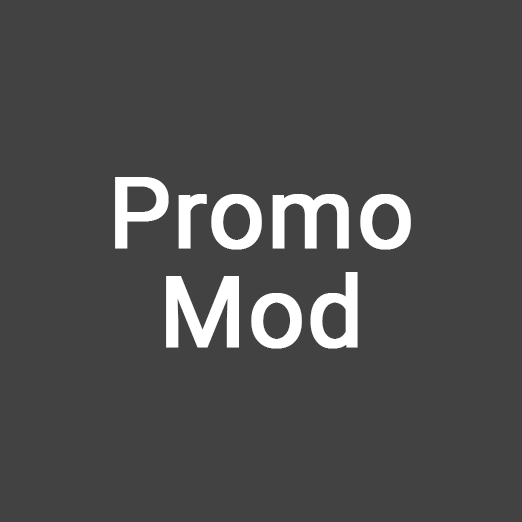
<style>
.page{position:relative;width:522px;height:522px;background:#424242}
.page>*{position:absolute;margin:0}
.t1{font:99px/99px "Roboto-Regular";color:#ffffff;font-weight:bold}
</style>
<div class="page">
<p class="t1" style="left:115px;top:177px;width:296px;height:172px;text-align:center">Promo<br>Mod</p>
</div>
